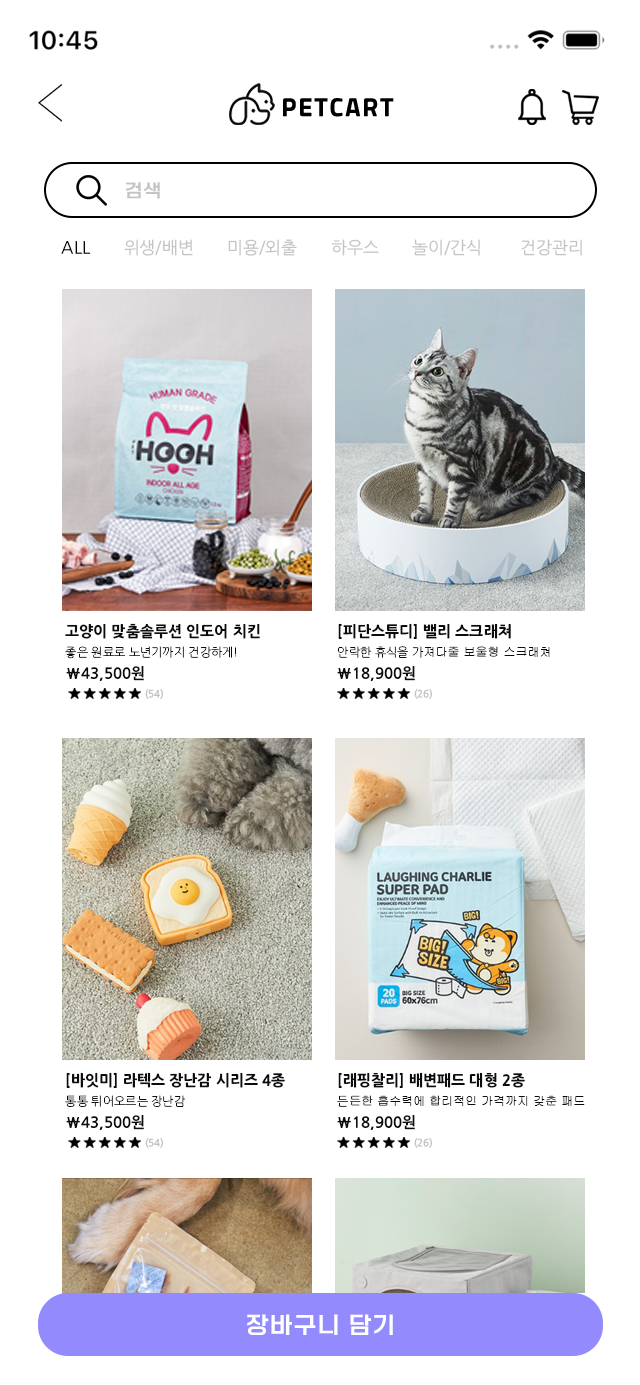
<style>
.page{position:relative;width:640px;height:1385px;background:#ffffff}
.page>*{position:absolute;margin:0}
.t1{font:18px "ONEMobileTitleRegular";letter-spacing:0.08em;color:#c4c4c4}
.t2{font:17px "NanumGothicOTF";color:#c4c4c4}
.t3{font:17px "NanumGothicOTF";color:#000000}
.t4{font:15px "NanumGothicOTFExtraBold";color:#0d0c0c}
.t5{font:12px "NanumGothicOTFLight";color:#0d0c0c}
.t6{font:12px "Gulim";color:#0d0c0c}
.t7{font:15px "NanumGothicOTFBold";color:#0d0c0c}
.t8{font:10px "NanumGothicOTFBold";color:#c4c4c4}
.t9{font:23px "ONEMobileTitleRegular";letter-spacing:0.08em;color:#ffffff}
</style>
<div class="page">
<p class="t1" style="left:126px;top:182px;width:34px;height:17px">검색</p>
<p class="t2" style="left:61px;top:239px;width:521px;height:17px"><span class="t3">ALL       </span>위생/배변       미용/외출       하우스       놀이/간식        건강관리</p>
<p class="t4" style="left:65px;top:623px;width:195px;height:16px">고양이 맞춤솔루션 인도어 치킨</p>
<p class="t4" style="left:338px;top:623px;width:173px;height:16px">[피단스튜디] 밸리 스크래쳐</p>
<p class="t5" style="left:65px;top:646px;width:171px;height:13px">좋은 원료로 노년기까지 건강하게!</p>
<p class="t6" style="left:337px;top:646px;width:213px;height:12px"><span class="t5">안락한 휴식을 가</span>져다줄 보울형 스크래쳐</p>
<p class="t7" style="left:66px;top:666px;width:78px;height:15px">\43,500원</p>
<p class="t7" style="left:337px;top:666px;width:78px;height:15px">\18,900원</p>
<p class="t8" style="left:145px;top:689px;width:18px;height:10px">(54)</p>
<p class="t8" style="left:414px;top:689px;width:18px;height:10px">(26)</p>
<p class="t4" style="left:66px;top:1072px;width:219px;height:16px">[바잇미] 라텍스 장난감 시리즈 4종</p>
<p class="t4" style="left:338px;top:1072px;width:187px;height:16px">[래핑찰리] 배변패드 대형 2종</p>
<p class="t5" style="left:65px;top:1095px;width:121px;height:12px">통통 튀어오르는 장난감</p>
<p class="t6" style="left:337px;top:1095px;width:248px;height:12px"><span class="t5">든</span>든한 흡수력에 합리적인 가격까지 갖춘 패드</p>
<p class="t7" style="left:66px;top:1115px;width:78px;height:15px">\43,500원</p>
<p class="t7" style="left:337px;top:1115px;width:78px;height:15px">\18,900원</p>
<p class="t8" style="left:145px;top:1138px;width:18px;height:10px">(54)</p>
<p class="t8" style="left:414px;top:1138px;width:18px;height:10px">(26)</p>
<p class="t9" style="left:247px;top:1314px;width:146px;height:21px">장바구니 담기</p>
</div>
